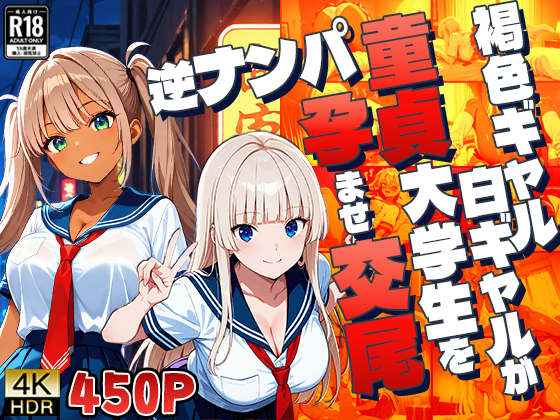
<style>
.page{position:relative;width:560px;height:420px}
.page>*{position:absolute;margin:0}
.t1{font:48px "DelaGothicOne-Regular";letter-spacing:-0.03em;color:#ffffff;scale:1.3 1}
.t2{font:71.5px "DelaGothicOne-Regular";color:#ffffff;scale:0.77 1}
.t3{font:62.4px "DelaGothicOne-Regular";color:#ffffff;scale:0.77 1}
.t4{font:70px "DelaGothicOne-Regular";scale:1.3 1}
.t5{font:69.2px "DelaGothicOne-Regular";scale:1.3 1}
.t6{font:30px "DelaGothicOne-Regular";color:#ffffff;scale:1.3 1}
.t7{font:55px "DelaGothicOne-Regular";color:#ffffff;scale:1.3 1}
.t8{font:35px "DelaGothicOne-Regular";color:#ffffff;scale:1.3 1}
.t9{font:74.5px "DelaGothicOne-Regular";scale:1.3 1}
.t10{font:52px "RiiCookieTest-R";font-weight:bold}
</style>
<div class="page">
<p class="t1" style="left:472px;top:2px;width:86px;height:250px;rotate:-10deg">褐色ギャル</p>
<p class="t2" style="left:147px;top:17px;width:210px;height:98px;rotate:-10deg"><span class="t3">逆</span>ナンパ</p>
<p class="t4" style="left:362px;top:13px;width:89px;height:152px;rotate:-10deg">童貞</p>
<p class="t5" style="left:299px;top:92px;width:73px;height:73px;rotate:-10deg">孕</p>
<p class="t6" style="left:335px;top:171px;width:34px;height:63px;rotate:-10deg">ませ</p>
<p class="t7" style="left:400px;top:163px;width:78px;height:211px;rotate:-10deg">大学生<span class="t8">を</span></p>
<p class="t1" style="left:458px;top:166px;width:77px;height:199px;rotate:-10deg">白ギャル</p>
<p class="t9" style="left:331px;top:237px;width:93px;height:158px;rotate:-10deg">交尾</p>
<p class="t8" style="left:500px;top:356px;width:38px;height:39px;rotate:-10deg">が</p>
<p class="t10" style="left:70px;top:372px;width:124px;height:42px">450P</p>
</div>
